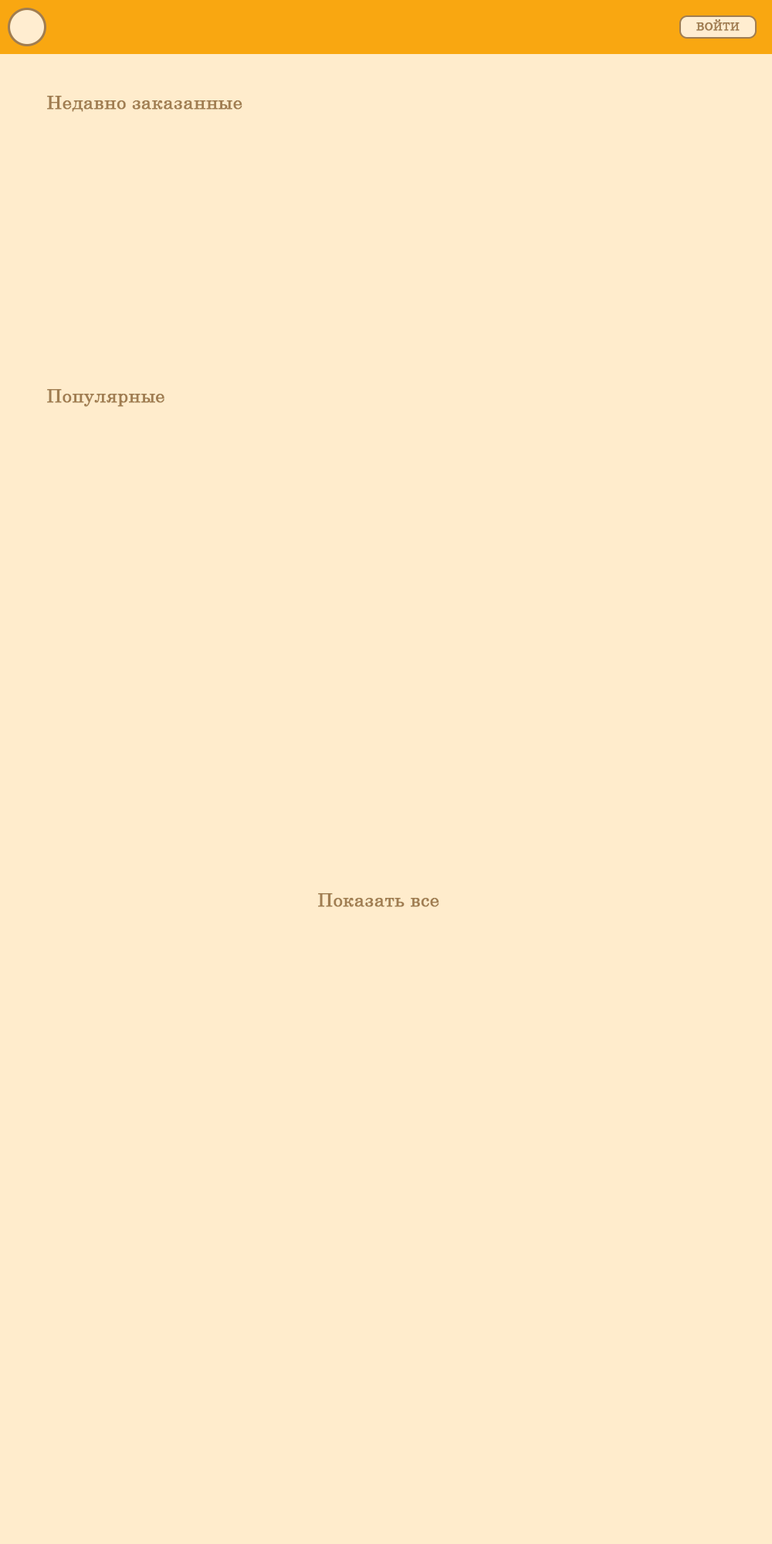
<style>
.page{position:relative;width:772px;height:1544px;background:#ffeccc}
.page>*{position:absolute;margin:0}
.t1{font:10.8px "Century";color:#a07d51;font-weight:bold}
.t2{font:18.5px "Century";color:#a07d51;font-weight:bold}
</style>
<div class="page">
<p class="t1" style="left:696px;top:19px;width:44px;height:12px">ВОЙТИ</p>
<p class="t2" style="left:47px;top:96px;width:195px;height:16px">Недавно заказанные</p>
<p class="t2" style="left:47px;top:389px;width:117px;height:18px">Популярные</p>
<p class="t2" style="left:318px;top:893px;width:121px;height:14px">Показать все</p>
</div>
